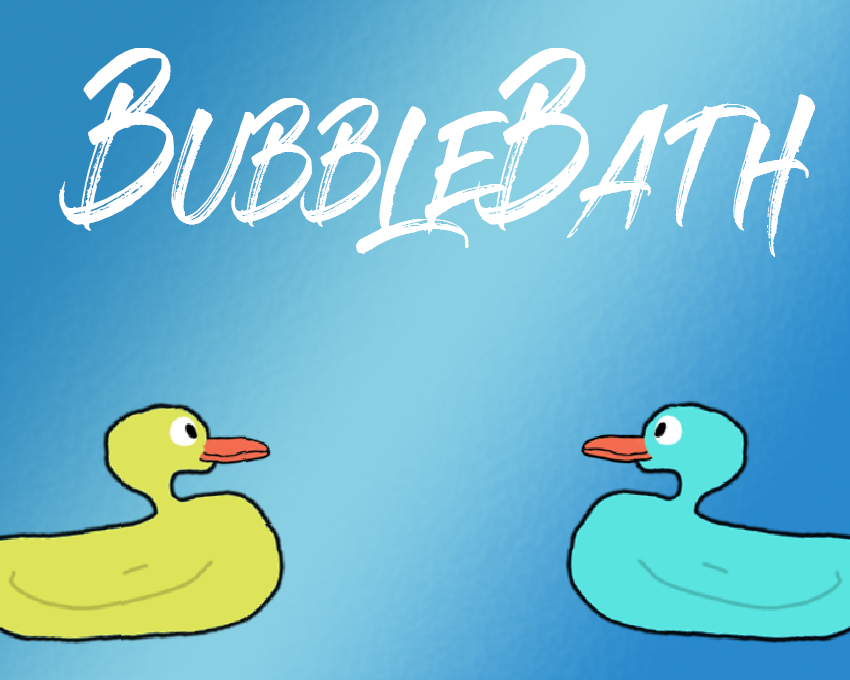
<style>
.page{position:relative;width:850px;height:680px}
.page>*{position:absolute;margin:0}
.t1{font:152.7px "GlossAndBloom";color:#ffffff;font-variant:small-caps;scale:0.9 1}
</style>
<div class="page">
<p class="t1" style="left:59px;top:48px;width:756px;height:209px">BubbleBath</p>
</div>
